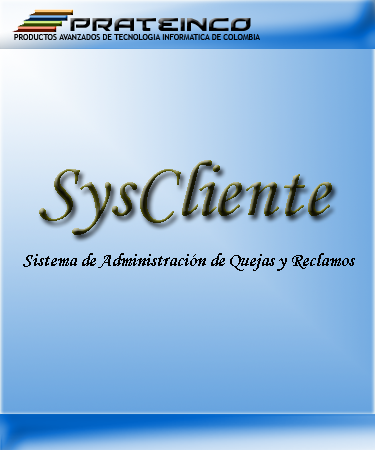
<style>
.page{position:relative;width:375px;height:450px}
.page>*{position:absolute;margin:0}
.t1{font:80px "MonotypeCorsiva";color:#000000}
.t2{font:18.7px "MonotypeCorsiva";color:#000000}
</style>
<div class="page">
<p class="t1" style="left:39px;top:160px;width:293px;height:75px">SysCliente</p>
<p class="t2" style="left:23px;top:253px;width:332px;height:18px">Sistema de Administración de Quejas y Reclamos</p>
</div>
